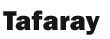
<style>
.page{position:relative;width:110px;height:39px;background:#ffffff}
.page>*{position:absolute;margin:0}
.t1{font:28px "FranklinGothic-Heavy";color:#161616}
</style>
<div class="page">
<p class="t1" style="left:3px;top:10px;width:97px;height:25px">Tafaray</p>
</div>
